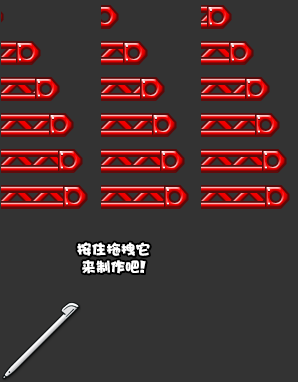
<style>
.page{position:relative;width:298px;height:382px;background:#333333}
.page>*{position:absolute;margin:0}
.t1{font:14.7px "DFPHaiBaoW12";color:#ffffff}
.t2{font:14.7px "MARIOFontv3_1-Solid";color:#ffffff}
</style>
<div class="page">
<p class="t1" style="left:77px;top:242px;width:73px;height:32px;text-align:center">按住拖拽它<br>来制作吧<span class="t2">！</span></p>
</div>
